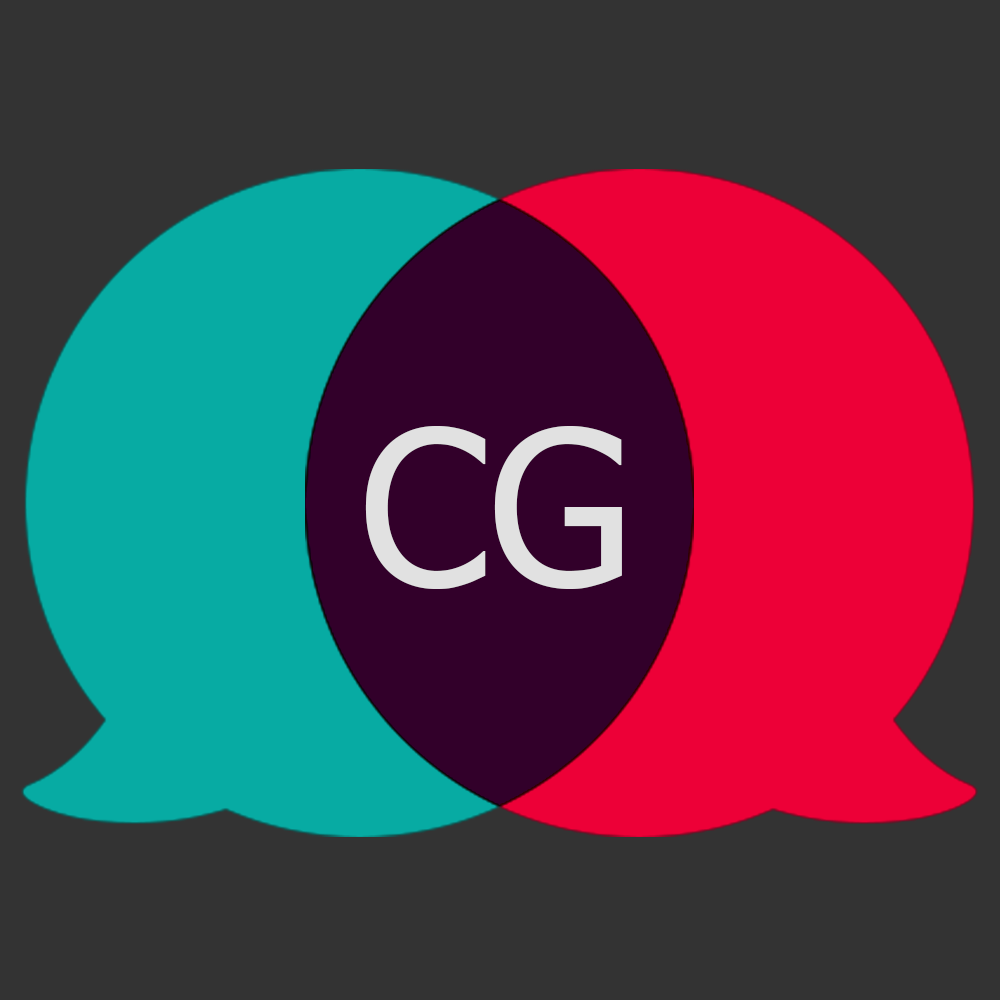
<style>
.page{position:relative;width:1000px;height:1000px;background:#333333}
.page>*{position:absolute;margin:0}
.t1{font:216px "Tahoma";color:#e1e1e1}
</style>
<div class="page">
<p class="t1" style="left:365px;top:426px;width:257px;height:163px">CG</p>
</div>
